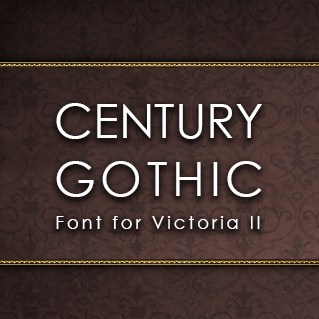
<style>
.page{position:relative;width:319px;height:319px}
.page>*{position:absolute;margin:0}
.t1{font:48px "CenturyGothic";color:#ffffff}
.t2{font:48px "CenturyGothic";letter-spacing:0.1em;color:#ffffff}
.t3{font:18px "CenturyGothic";letter-spacing:0.16em;color:#ffffff}
</style>
<div class="page">
<p class="t1" style="left:56px;top:103px;width:206px;height:94px;text-align:center">CENTURY<br><span class="t2">GOTHIC</span></p>
<p class="t3" style="left:56px;top:216px;width:204px;height:13px">Font for Victoria II</p>
</div>
